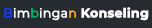
<style>
.page{position:relative;width:152px;height:28px;background:#262a31}
.page>*{position:absolute;margin:0}
.t1{font:12.5px "Montserrat-Bold";color:#ffffff;font-weight:bold}
.t2{font:12.5px "Montserrat-Regular";color:#113eff;font-weight:bold}
.t3{font:12.5px "Montserrat-Regular";color:#ffffff;font-weight:bold}
.t4{font:12.5px "Montserrat-Regular";color:#0ab466;font-weight:bold}
.t5{font:12.5px "Montserrat-Regular";color:#ffb400;font-weight:bold}
</style>
<div class="page">
<p class="t1" style="left:4px;top:7px;width:145px;height:14px"><span class="t2">B</span><span class="t3">im</span><span class="t4">b</span><span class="t3">inga</span><span class="t5">n </span>Konseling</p>
</div>
